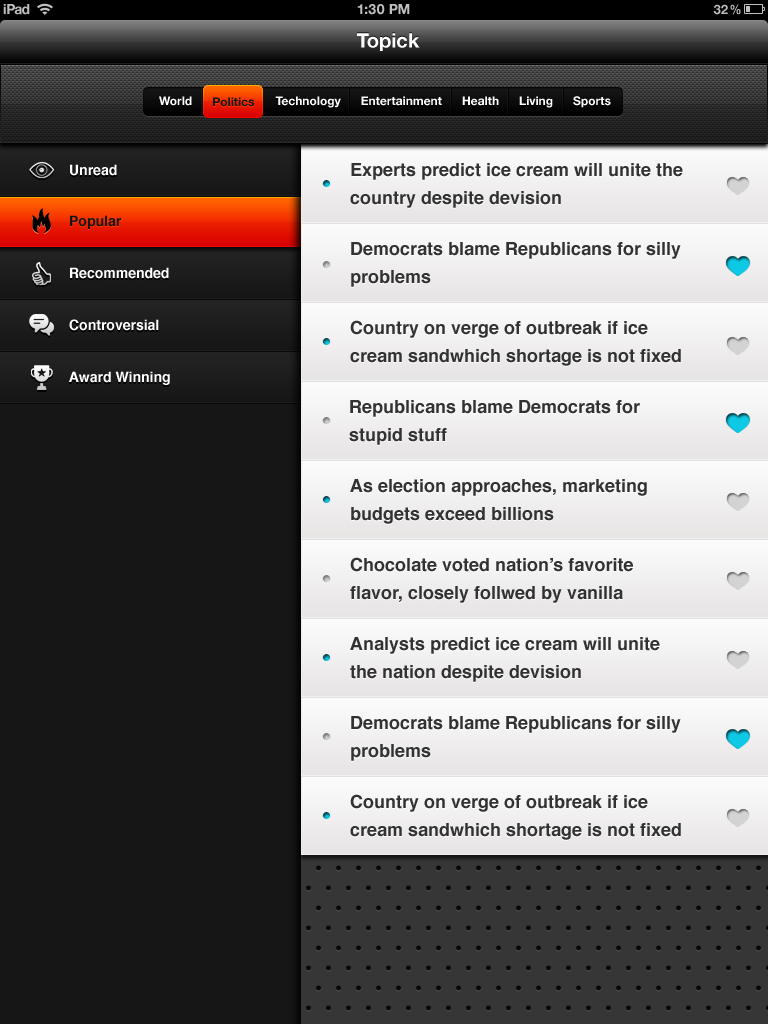
<style>
.page{position:relative;width:768px;height:1024px;background:#161616}
.page>*{position:absolute;margin:0}
.t1{font:14px "HelveticaNeue-Bold";letter-spacing:-0.06em;color:#bfbfbf}
.t2{font:14px "HelveticaNeue-Bold";color:#bfbfbf;text-transform:uppercase}
.t3{font:13px "HelveticaNeue-Bold";color:#bfbfbf;text-transform:uppercase}
.t4{font:13px "HelveticaNeue-Bold";color:#bfbfbf;text-transform:uppercase;scale:0.89 1}
.t5{font:20px "HelveticaNeue-Bold";color:#ffffff}
.t6{font:12px "HelveticaNeue-Bold";color:#ffffff}
.t7{font:12px "HelveticaNeue-Bold";color:#161616}
.t8{font:14px "Helvetica-Bold";color:#ffffff}
.t9{font:18px/28px "Helvetica-Bold";color:#323232}
.t10{font:14px "Helvetica-Bold";color:#161616}
</style>
<div class="page">
<p class="t1" style="left:3px;top:4px;width:27px;height:11px">iPad</p>
<p class="t2" style="left:357px;top:4px;width:53px;height:11px">1:30 PM</p>
<p class="t3" style="left:713px;top:4px;width:28px;height:11px">32<span class="t4">%</span></p>
<p class="t5" style="left:357px;top:33px;width:63px;height:18px">Topick</p>
<p class="t6" style="left:159px;top:96px;width:452px;height:12px">World                         Technology      Entertainment      Health      Living      Sports</p>
<p class="t7" style="left:213px;top:97px;width:41px;height:10px">Politics</p>
<p class="t8" style="left:70px;top:164px;width:47px;height:12px">Unread</p>
<p class="t9" style="left:350px;top:163px;width:333px;height:45px">Experts predict ice cream will unite the<br>country despite devision</p>
<p class="t10" style="left:70px;top:215px;width:51px;height:14px">Popular</p>
<p class="t9" style="left:351px;top:242px;width:330px;height:45px">Democrats blame Republicans for silly<br>problems</p>
<p class="t8" style="left:70px;top:267px;width:99px;height:12px">Recommended</p>
<p class="t8" style="left:69px;top:319px;width:90px;height:12px">Controversial</p>
<p class="t9" style="left:350px;top:320px;width:331px;height:46px">Country on verge of outbreak if ice <br>cream sandwhich shortage is not fixed</p>
<p class="t8" style="left:69px;top:371px;width:101px;height:14px">Award Winning</p>
<p class="t9" style="left:349px;top:400px;width:291px;height:45px">Republicans blame Democrats for <br>stupid stuff</p>
<p class="t9" style="left:350px;top:479px;width:297px;height:45px">As election approaches, marketing <br>budgets exceed billions</p>
<p class="t9" style="left:350px;top:557px;width:283px;height:46px">Chocolate voted nation’s favorite <br>flavor, closely follwed by vanilla</p>
<p class="t9" style="left:350px;top:637px;width:310px;height:45px">Analysts predict ice cream will unite <br>the nation despite devision</p>
<p class="t9" style="left:351px;top:716px;width:330px;height:45px">Democrats blame Republicans for silly<br>problems</p>
<p class="t9" style="left:350px;top:794px;width:331px;height:46px">Country on verge of outbreak if ice <br>cream sandwhich shortage is not fixed</p>
</div>
